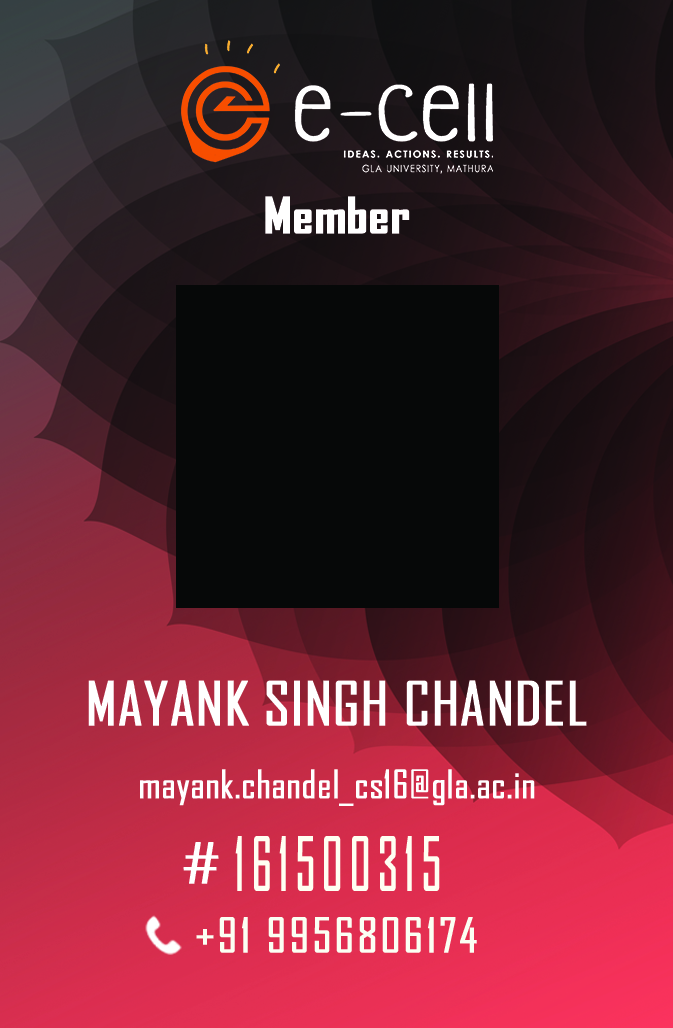
<style>
.page{position:relative;width:673px;height:1028px}
.page>*{position:absolute;margin:0}
.t1{font:47.9px "AgencyFB-Bold";color:#ffffff;font-weight:bold;scale:1.05 1}
.t2{font:58.3px "AgencyFB-Reg";color:#ffffff;text-transform:uppercase;font-weight:bold;scale:1.05 1}
.t3{font:37.5px "AgencyFB-Reg";color:#ffffff;font-weight:bold}
.t4{font:70.8px "AgencyFB-Reg";letter-spacing:0.12em;color:#fffff2;font-weight:bold;scale:0.68 1}
.t5{font:45.8px "AgencyFB-Reg";letter-spacing:0.05em;color:#fbfff3;font-weight:bold}
</style>
<div class="page">
<p class="t1" style="left:265px;top:196px;width:145px;height:38px">Member</p>
<p class="t2" style="left:88px;top:680px;width:499px;height:46px">MAYANK SINGH CHANDEL</p>
<p class="t3" style="left:140px;top:769px;width:395px;height:37px">mayank.chandel_cs16@gla.ac.in</p>
<p class="t4" style="left:235px;top:836px;width:205px;height:55px">161500315</p>
<p class="t5" style="left:196px;top:917px;width:281px;height:36px">+91 9956806174</p>
</div>
